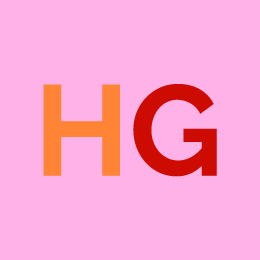
<style>
.page{position:relative;width:260px;height:260px;background:#ffb2e8}
.page>*{position:absolute;margin:0}
.t1{font:128px "Raleway-Bold";color:#ff8435}
.t2{font:128px "Raleway-Bold";color:#ce0a00}
</style>
<div class="page">
<p class="t1" style="left:43px;top:84px;width:174px;height:93px">H<span class="t2">G</span></p>
</div>
